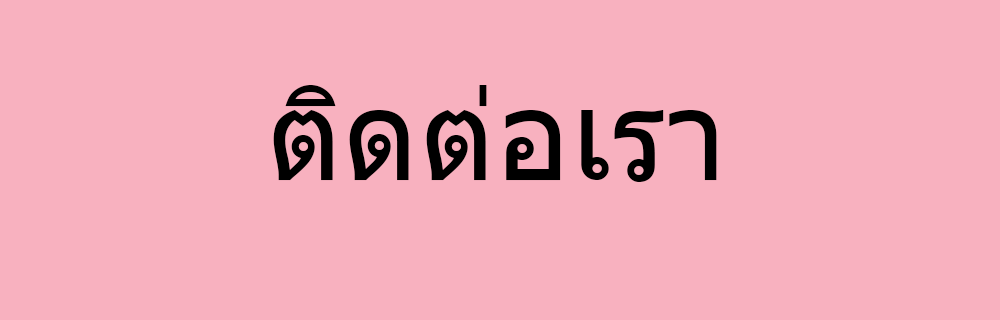
<style>
.page{position:relative;width:1000px;height:320px;background:#f8b1bf}
.page>*{position:absolute;margin:0}
.t1{font:125px "Tahoma";color:#000000}
</style>
<div class="page">
<p class="t1" style="left:273px;top:85px;width:444px;height:97px">ติดต่อเรา</p>
</div>
